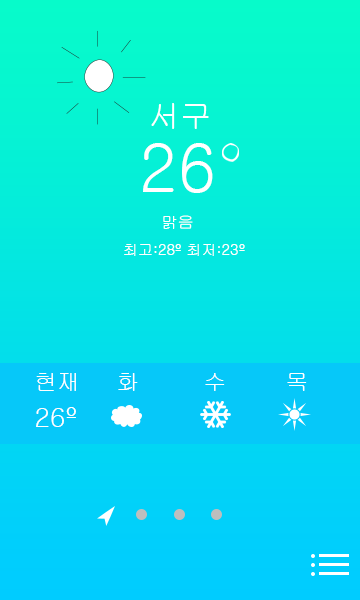
<style>
.page{position:relative;width:360px;height:600px}
.page>*{position:absolute;margin:0}
.t1{font:31.3px "Gulim";color:#ffffff}
.t2{font:66.6px "Gulim";color:#ffffff}
.t3{font:16.2px "Gulim";color:#ffffff}
.t4{font:14.9px "Gulim";color:#ffffff}
.t5{font:22.6px "Gulim";color:#ffffff}
.t6{font:26.9px "Gulim";color:#ffffff}
</style>
<div class="page">
<p class="t1" style="left:151px;top:103px;width:58px;height:26px">서구</p>
<p class="t2" style="left:143px;top:143px;width:70px;height:50px">26</p>
<p class="t3" style="left:163px;top:215px;width:30px;height:14px">맑음</p>
<p class="t4" style="left:124px;top:244px;width:121px;height:12px">최고:28º 최저:23º</p>
<p class="t5" style="left:36px;top:373px;width:40px;height:18px">현재</p>
<p class="t5" style="left:118px;top:373px;width:20px;height:18px">화</p>
<p class="t5" style="left:205px;top:373px;width:20px;height:18px">수</p>
<p class="t5" style="left:287px;top:373px;width:20px;height:18px">목</p>
<p class="t6" style="left:36px;top:407px;width:40px;height:20px">26º</p>
</div>
